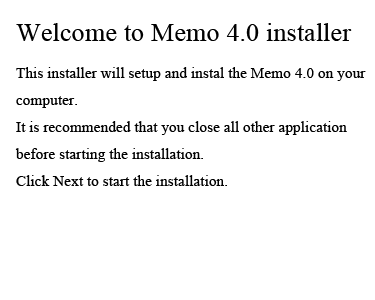
<style>
.page{position:relative;width:375px;height:300px;background:#ffffff}
.page>*{position:absolute;margin:0}
.t1{font:15.4px "TimesNewRomanPSMT";color:#000000}
.t2{font:26.4px "TimesNewRomanPSMT";color:#000000}
</style>
<div class="page">
<p class="t1" style="left:15px;top:23px;width:351px;height:163px"><span class="t2">Welcome to Memo 4.0 installer<br></span>This installer will setup and instal the Memo 4.0 on your<br>computer.<br>It is recommended that you close all other application<br>before starting the installation.<br>Click Next to start the installation.</p>
</div>
